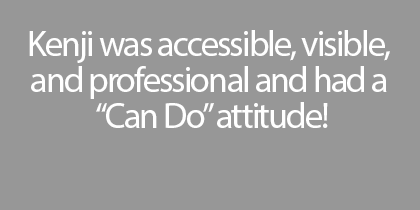
<style>
.page{position:relative;width:420px;height:210px;background:#979797}
.page>*{position:absolute;margin:0}
.t1{font:36px/36px "MyriadPro-Regular";letter-spacing:-0.05em;color:#ffffff}
</style>
<div class="page">
<p class="t1" style="left:29px;top:30px;width:361px;height:98px;text-align:center">Kenji was accessible, visible, <br>and professional and had a <br>“Can Do” attitude!</p>
</div>
